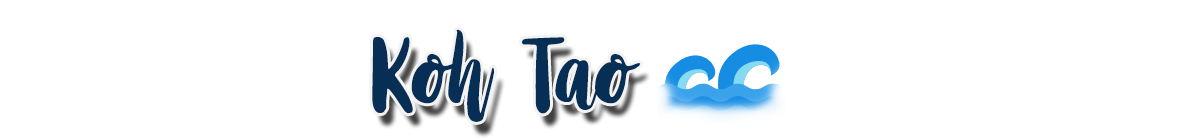
<style>
.page{position:relative;width:1200px;height:139px;background:#ffffff}
.page>*{position:absolute;margin:0}
.t1{font:120px "StayWildyPersonalUseOnly";color:#072e55}
</style>
<div class="page">
<p class="t1" style="left:372px;top:29px;width:268px;height:93px">Koh Tao</p>
</div>
